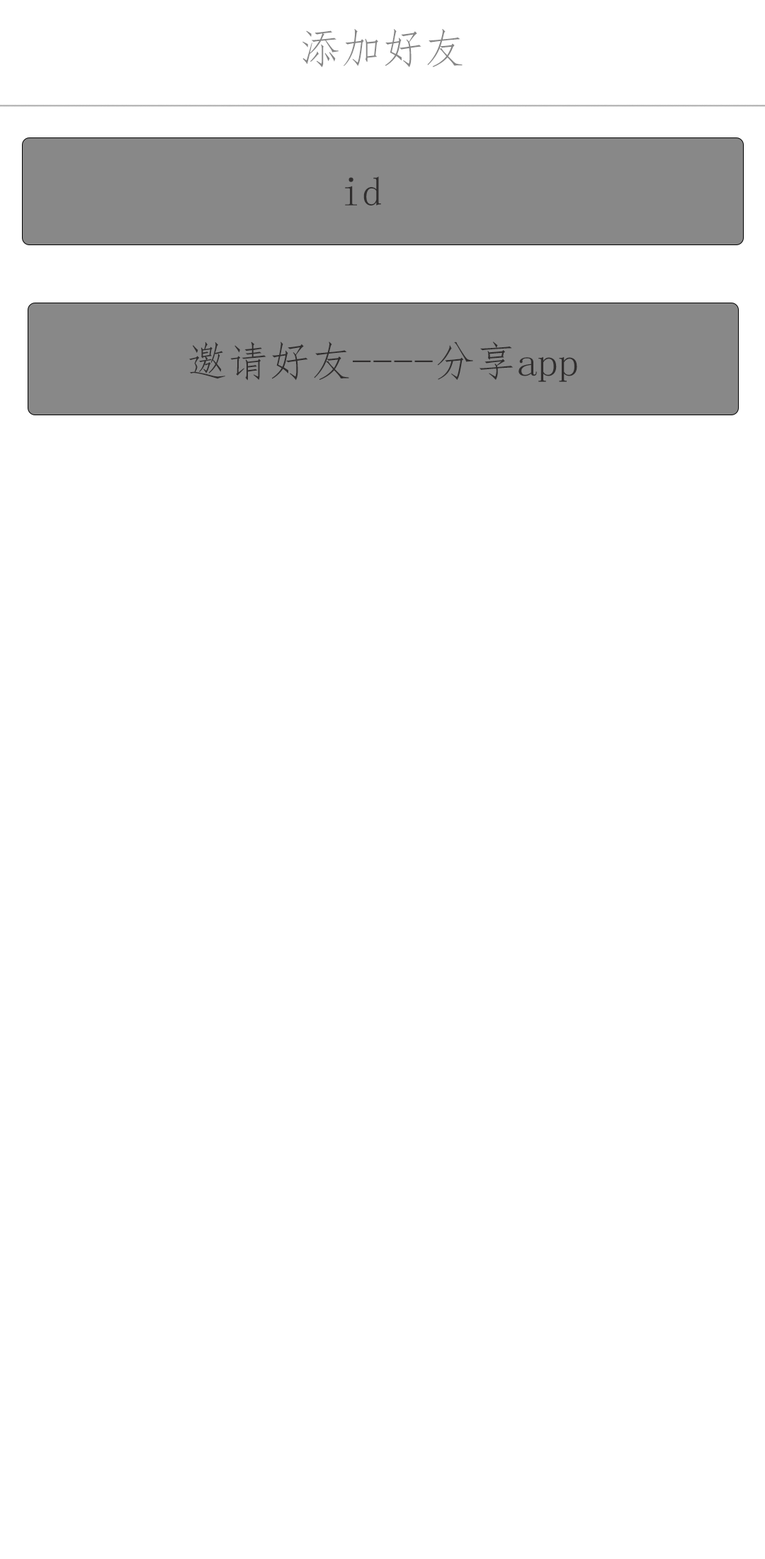
<style>
.page{position:relative;width:765px;height:1559px;background:#ffffff}
.page>*{position:absolute;margin:0}
.t1{font:41.3px "FangSong";color:#878787}
.t2{font:41.3px "FangSong";color:#302e2e}
</style>
<div class="page">
<p class="t1" style="left:302px;top:28px;width:161px;height:39px">添加好友</p>
<p class="t2" style="left:345px;top:176px;width:36px;height:29px">id</p>
<p class="t2" style="left:189px;top:341px;width:388px;height:41px">邀请好友----分享app</p>
</div>
